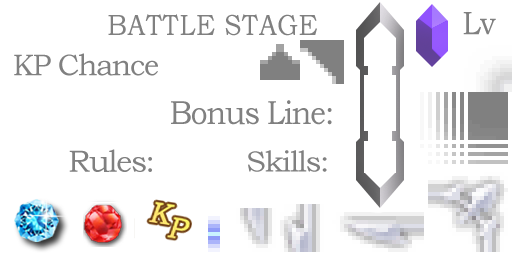
<style>
.page{position:relative;width:512px;height:256px;background:#ffffff}
.page>*{position:absolute;margin:0}
.t1{font:29.4px "BookmanOldStyle";letter-spacing:0.02em;color:#808080;scale:0.89 1}
.t2{font:32.8px "BookmanOldStyle";letter-spacing:-0.04em;color:#808080;scale:0.95 1}
.t3{font:30.3px "BookmanOldStyle";letter-spacing:-0.04em;color:#808080;scale:0.96 1}
.t4{font:33.2px "BookmanOldStyle";letter-spacing:-0.04em;color:#808080;scale:0.9 1}
.t5{font:30.9px "BookmanOldStyle";letter-spacing:-0.04em;color:#808080}
.t6{font:29.4px "BookmanOldStyle";letter-spacing:-0.04em;color:#808080}
</style>
<div class="page">
<p class="t1" style="left:108px;top:14px;width:209px;height:22px">BATTLE STAGE</p>
<p class="t2" style="left:463px;top:12px;width:33px;height:23px">Lv</p>
<p class="t3" style="left:14px;top:53px;width:144px;height:23px">KP Chance</p>
<p class="t4" style="left:171px;top:100px;width:161px;height:25px">Bonus Line:</p>
<p class="t5" style="left:69px;top:149px;width:83px;height:23px">Rules:</p>
<p class="t6" style="left:248px;top:150px;width:79px;height:22px">Skills:</p>
</div>
